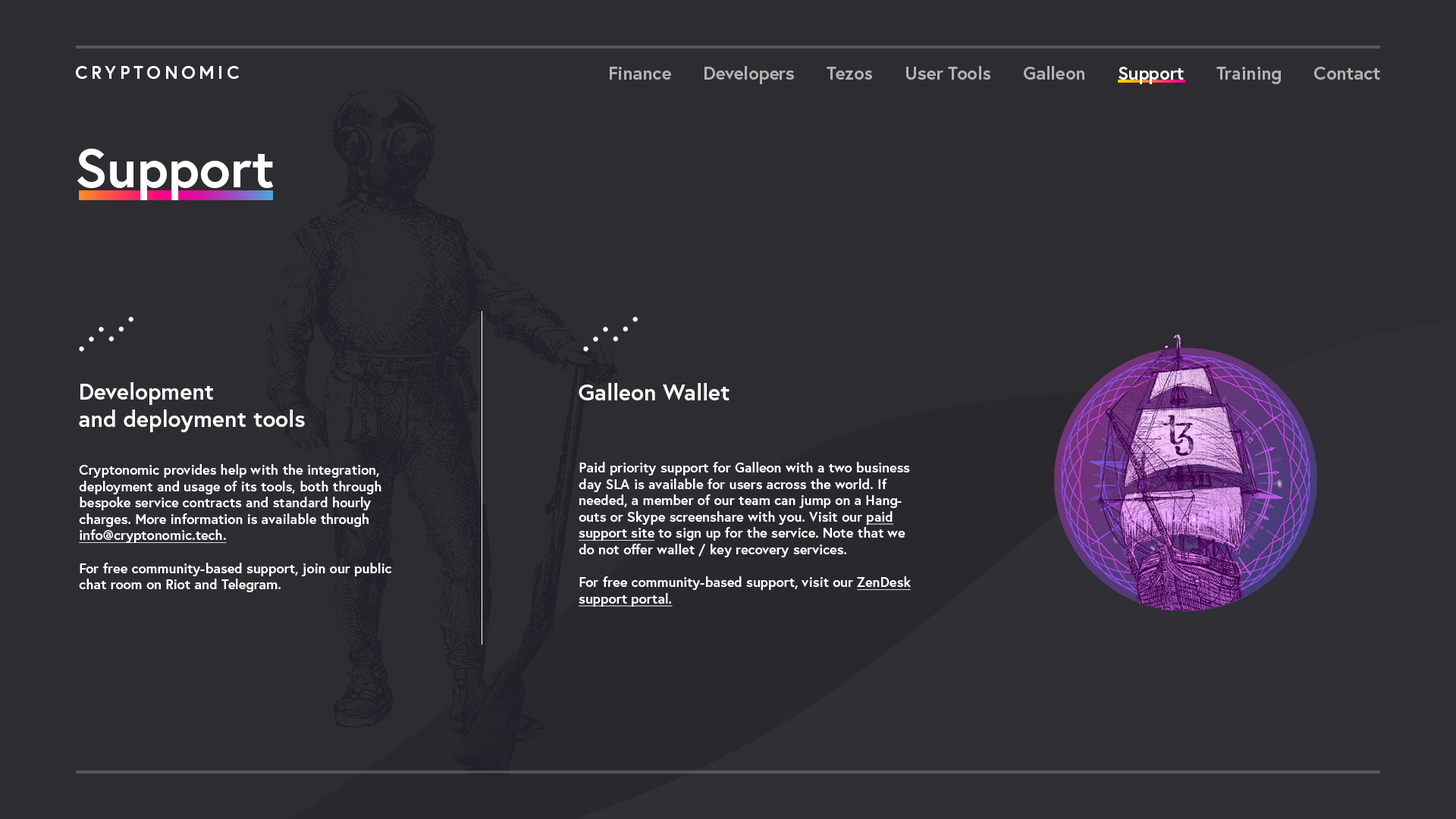
<style>
.page{position:relative;width:1456px;height:819px;background:#2d2c31}
.page>*{position:absolute;margin:0}
.t1{font:18.2px "Europa-Bold";letter-spacing:0.2em;color:#ffffff;text-transform:uppercase}
.t2{font:18.2px "Europa-Bold";color:#b2b2b2}
.t3{font:18.2px "Europa-Bold";color:#ffffff}
.t4{font:54.6px "Europa-Bold";color:#ffffff}
.t5{font:22.7px "Europa-Bold";color:#ffffff}
.t6{font:13.6px "Europa-Bold";color:#ffffff}
.t7{font:13.6px "Europa-Bold";color:#ffffff;text-decoration:underline}
</style>
<div class="page">
<p class="t1" style="left:76px;top:66px;width:163px;height:13px">CryptoNOMIC</p>
<p class="t2" style="left:610px;top:66px;width:770px;height:18px">Finance      Developers      Tezos      User Tools      Galleon      <span class="t3">Support      </span>Training      Contact</p>
<p class="t4" style="left:77px;top:149px;width:197px;height:51px">Support</p>
<p class="t5" style="left:79px;top:382px;width:226px;height:50px">Development<br>and deployment tools</p>
<p class="t5" style="left:579px;top:383px;width:151px;height:17px">Galleon Wallet</p>
<p class="t6" style="left:579px;top:462px;width:332px;height:145px">Paid priority support for Galleon with a two business day SLA is available for users across the world. If needed, a member of our team can jump on a Hangouts or Skype screenshare with you. Visit our <span class="t7">paid support site</span> to sign up for the service. Note that we do not offer wallet / key recovery services. <br><br>For free community-based support, visit our <span class="t7">ZenDesk support portal.</span></p>
<p class="t6" style="left:79px;top:464px;width:313px;height:128px">Cryptonomic provides help with the integration, deployment and usage of its tools, both through bespoke service contracts and standard hourly charges. More information is available through <br><span class="t7">info@cryptonomic.tech.<br></span><br>For free community-based support, join our public chat room on Riot and Telegram.</p>
</div>
